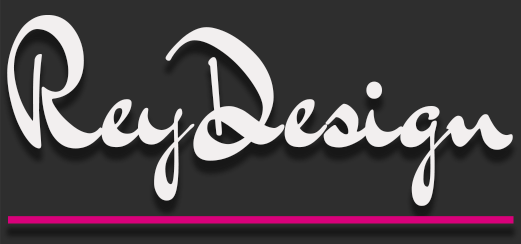
<style>
.page{position:relative;width:521px;height:244px;background:#2e2e2e}
.page>*{position:absolute;margin:0}
.t1{font:144px "DrSugiyama-Regular";color:#f2efef}
</style>
<div class="page">
<p class="t1" style="left:7px;top:15px;width:506px;height:191px">ReyDesign</p>
</div>
